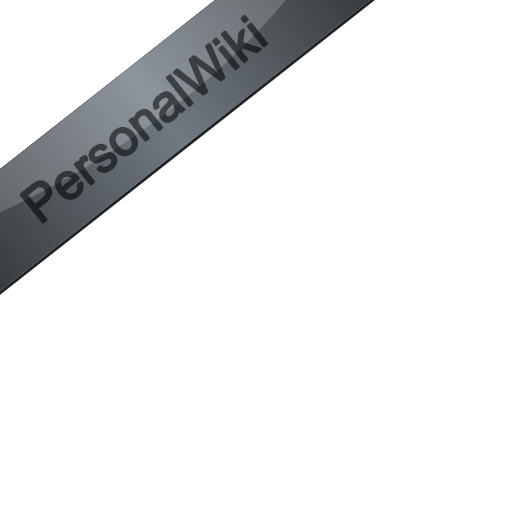
<style>
.page{position:relative;width:512px;height:512px;background:#ffffff}
.page>*{position:absolute;margin:0}
.t1{font:50.4px "ArialMT";color:#323639}
</style>
<div class="page">
<p class="t1" style="left:20px;top:15px;width:248px;height:208px;rotate:-39deg">PersonalWiki</p>
</div>
